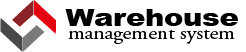
<style>
.page{position:relative;width:246px;height:52px;background:#ffffff}
.page>*{position:absolute;margin:0}
.t1{font:24px "Arial-Black";color:#000103;scale:1.19 1}
.t2{font:18px "AGaramondPro-Regular";color:#000103;scale:1.19 1}
</style>
<div class="page">
<p class="t1" style="left:65px;top:9px;width:173px;height:17px">Warehouse</p>
<p class="t2" style="left:68px;top:29px;width:167px;height:15px">management system</p>
</div>
